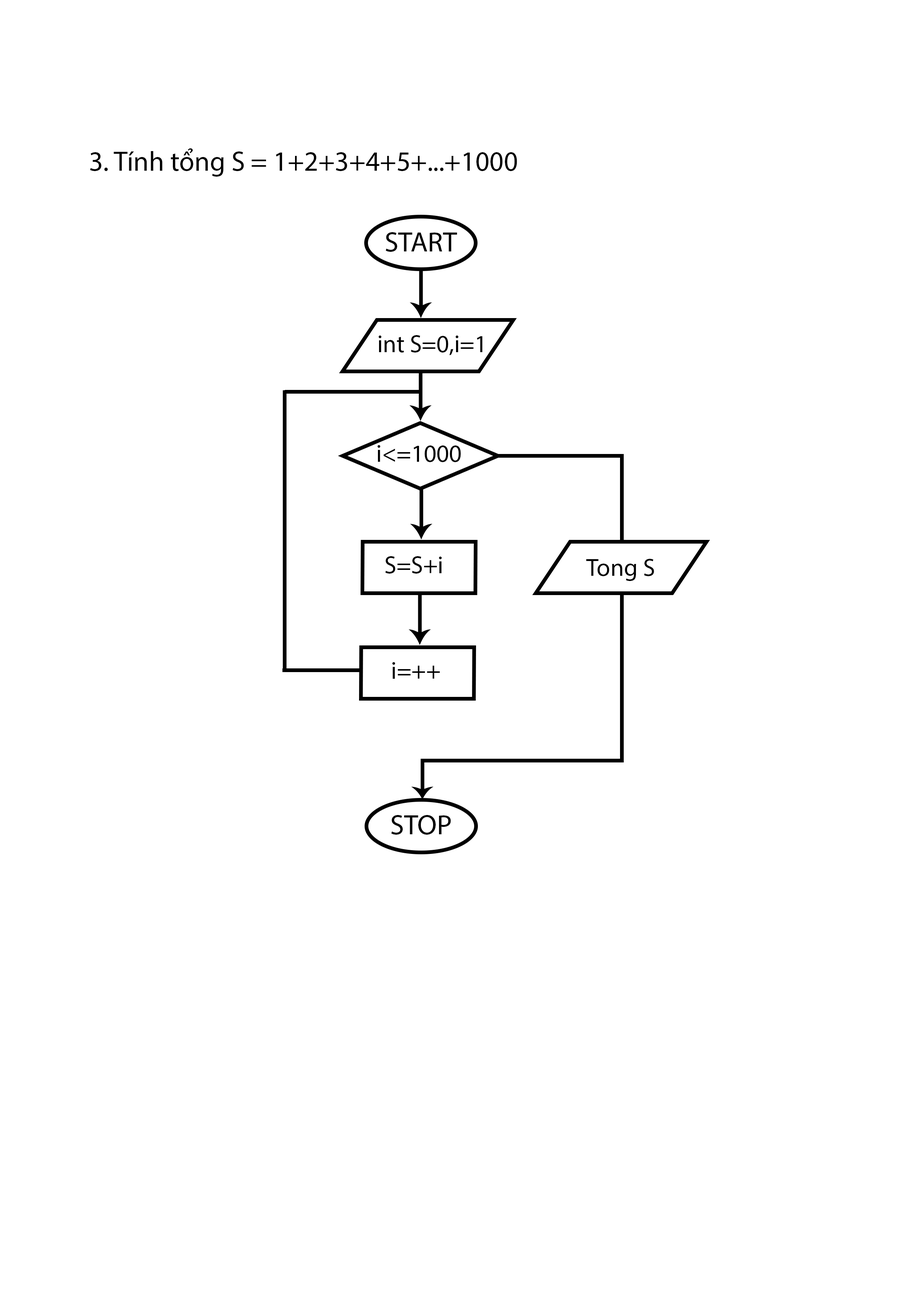
<style>
.page{position:relative;width:918px;height:1299px;background:#ffffff}
.page>*{position:absolute;margin:0}
.t1{font:27.8px "MyriadPro-Regular";color:#000000}
.t2{font:28.2px "MyriadPro-Regular";color:#000000}
.t3{font:24.5px "MyriadPro-Regular";color:#000000}
</style>
<div class="page">
<p class="t1" style="left:90px;top:148px;width:427px;height:29px">3. Tính tổng S = 1+2+3+4+5+...+1000</p>
<p class="t2" style="left:386px;top:232px;width:71px;height:20px">START</p>
<p class="t3" style="left:379px;top:335px;width:103px;height:20px">int S=0,i=1</p>
<p class="t3" style="left:378px;top:445px;width:83px;height:17px">i&lt;=1000</p>
<p class="t3" style="left:385px;top:556px;width:57px;height:17px">S=S+i</p>
<p class="t3" style="left:586px;top:559px;width:68px;height:22px">Tong S</p>
<p class="t3" style="left:392px;top:662px;width:48px;height:17px">i=++</p>
<p class="t2" style="left:391px;top:815px;width:60px;height:19px">STOP</p>
</div>
